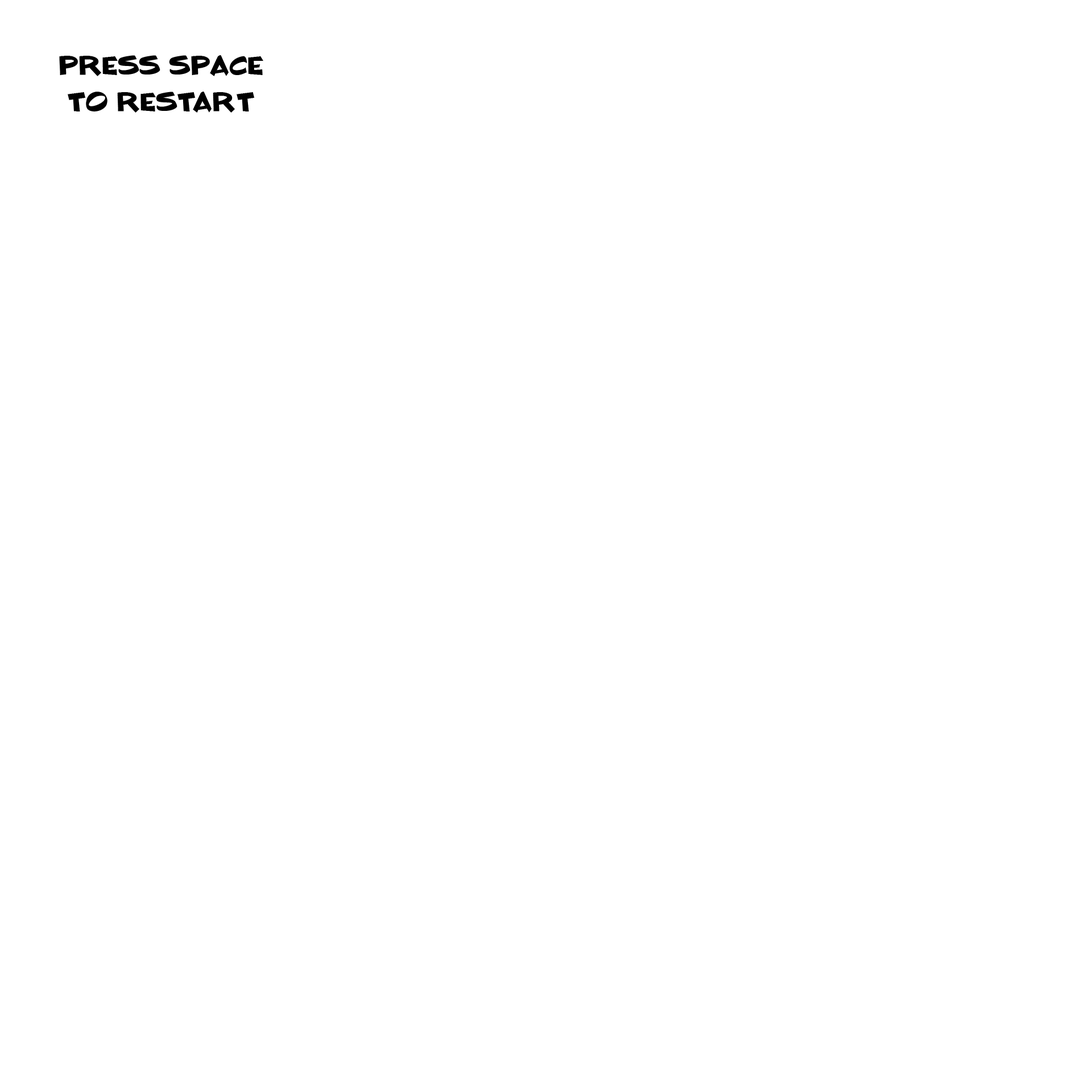
<style>
.page{position:relative;width:1092px;height:1092px;background:#ffffff}
.page>*{position:absolute;margin:0}
.t1{font:30.3px "BLOCKHEADDUDEPersonalUse";color:#000000}
</style>
<div class="page">
<p class="t1" style="left:59px;top:55px;width:204px;height:58px;text-align:center">Press space to restart</p>
</div>
